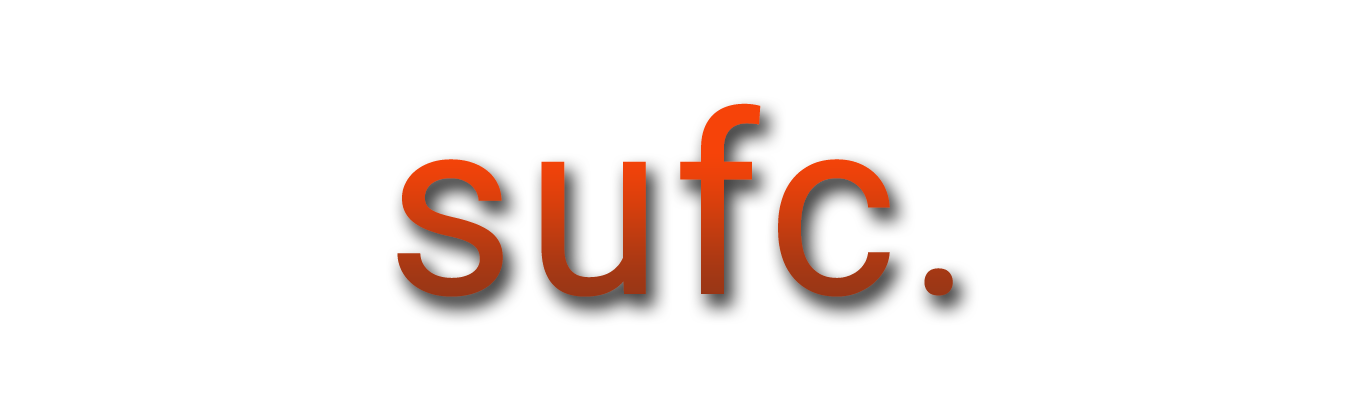
<style>
.page{position:relative;width:1350px;height:400px;background:#ffffff}
.page>*{position:absolute;margin:0}
.t1{font:250px "Roboto-Regular";letter-spacing:0.04em}
</style>
<div class="page">
<p class="t1" style="left:397px;top:103px;width:556px;height:194px">sufc.</p>
</div>
